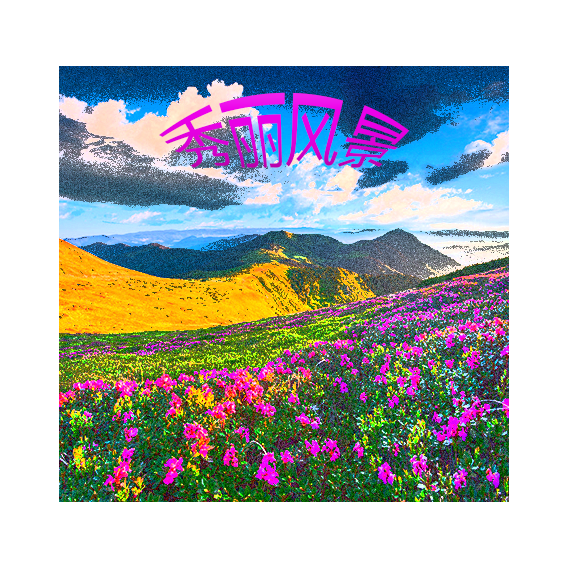
<style>
.page{position:relative;width:567px;height:567px;background:#ffffff}
.page>*{position:absolute;margin:0}
.t1{font:48px "MicrosoftYaHei";color:#e600e2}
</style>
<div class="page">
<p class="t1" style="left:159px;top:92px;width:250px;height:76px">秀丽风景</p>
</div>
